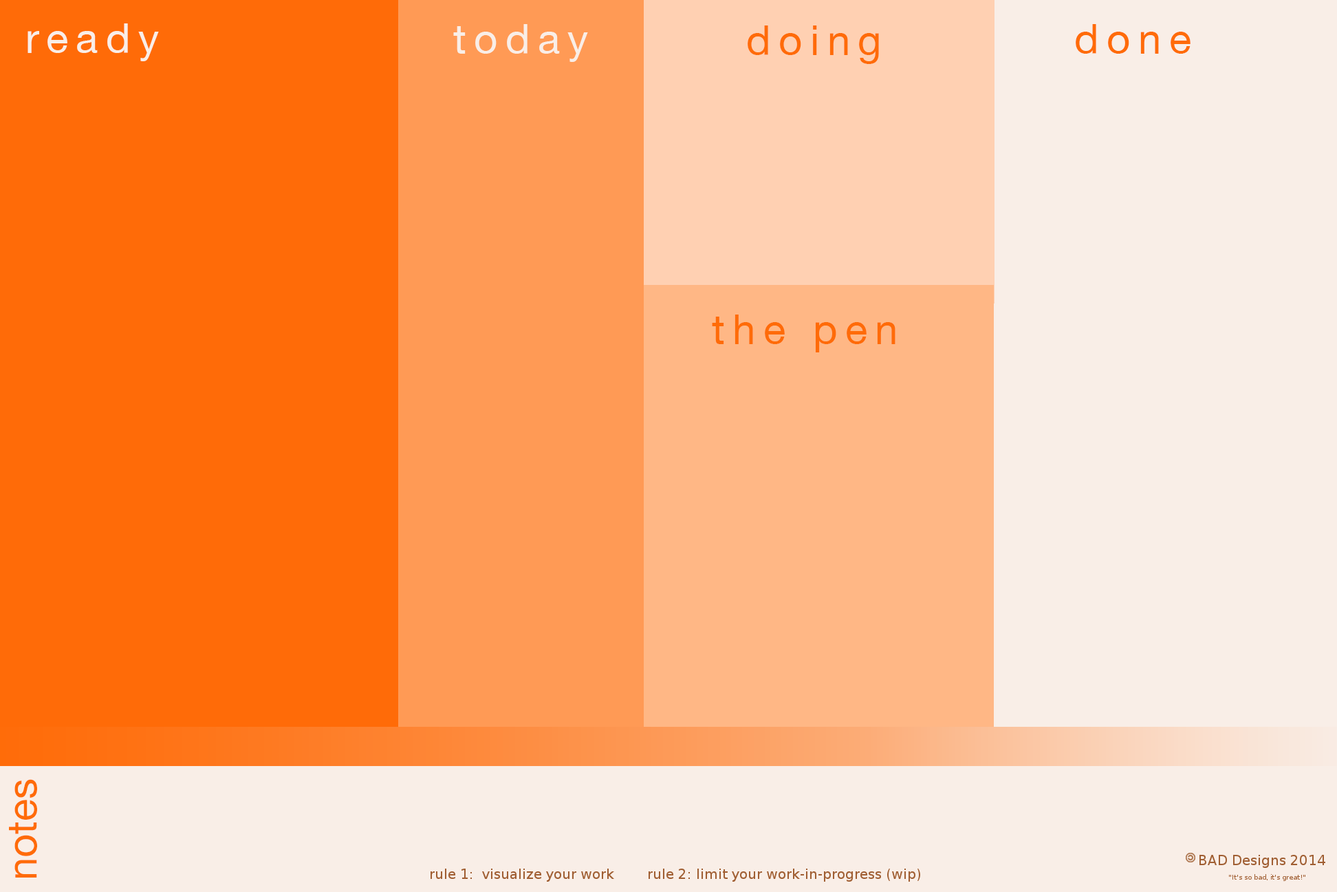
<style>
.page{position:relative;width:1337px;height:892px;background:#f9eee7}
.page>*{position:absolute;margin:0}
.t1{font:41.3px "HelveticaNeue";letter-spacing:0.19em;color:#f9eee7}
.t2{font:41.3px "HelveticaNeue";letter-spacing:0.19em;color:#ff6b08}
.t3{font:41.1px "HelveticaNeue";letter-spacing:-0.005em;color:#ff6b08}
</style>
<div class="page">
<p class="t1" style="left:28px;top:23px;width:131px;height:38px">ready</p>
<p class="t1" style="left:453px;top:24px;width:135px;height:38px">today</p>
<p class="t2" style="left:748px;top:25px;width:131px;height:39px">doing</p>
<p class="t2" style="left:1076px;top:24px;width:115px;height:30px">done</p>
<p class="t2" style="left:712px;top:314px;width:184px;height:38px">the pen</p>
<p class="t3" style="left:9px;top:779px;width:28px;height:98px;rotate:-90deg">notes</p>
</div>
